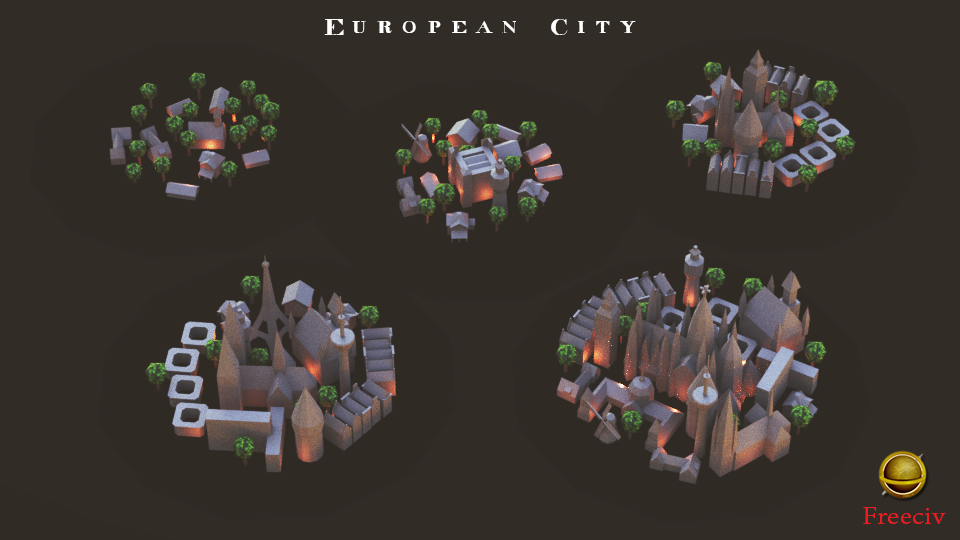
<style>
.page{position:relative;width:960px;height:540px;background:#2f2a24}
.page>*{position:absolute;margin:0}
.t1{font:19.8px "Decadenceinthedark";color:#ffffff;scale:1.16 1}
.t2{font:19.8px "Decadenceinthedark";scale:1.16 1}
.t3{font:26.7px "AdobeDevanagari-Regular";color:#ed1c24;scale:1.16 1}
</style>
<div class="page">
<p class="t1" style="left:324px;top:19px;width:312px;height:16px">European City</p>
<p class="t2" style="left:350px;top:19px;width:261px;height:16px">Modern City</p>
<p class="t3" style="left:863px;top:507px;width:83px;height:17px">Freeciv</p>
</div>
